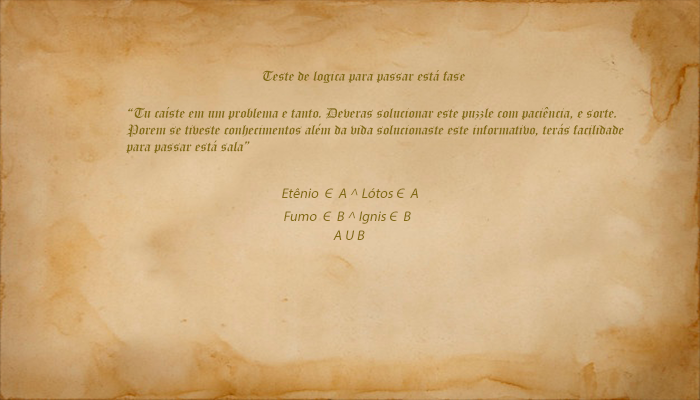
<style>
.page{position:relative;width:700px;height:400px}
.page>*{position:absolute;margin:0}
.t1{font:14px "OldEnglishTextMT";color:#826a12;font-style:italic}
.t2{font:14px "MyriadPro-Regular";color:#826a12;font-style:italic}
</style>
<div class="page">
<p class="t1" style="left:262px;top:70px;width:204px;height:13px">Teste de logica para passar está fase</p>
<p class="t1" style="left:126px;top:107px;width:498px;height:47px">“Tu caíste em um problema e tanto. Deveras solucionar este puzzle com paciência, e sorte. <br>Porem se tiveste conhecimentos além da vida solucionaste este informativo, terás facilidade <br>para passar está sala”</p>
<p class="t2" style="left:282px;top:188px;width:136px;height:10px">Etênio  Є  A ^ Lótos Є  A</p>
<p class="t2" style="left:284px;top:211px;width:127px;height:13px">Fumo  Є  B ^ Ignis Є  B</p>
<p class="t2" style="left:333px;top:230px;width:32px;height:10px">A U B</p>
</div>
